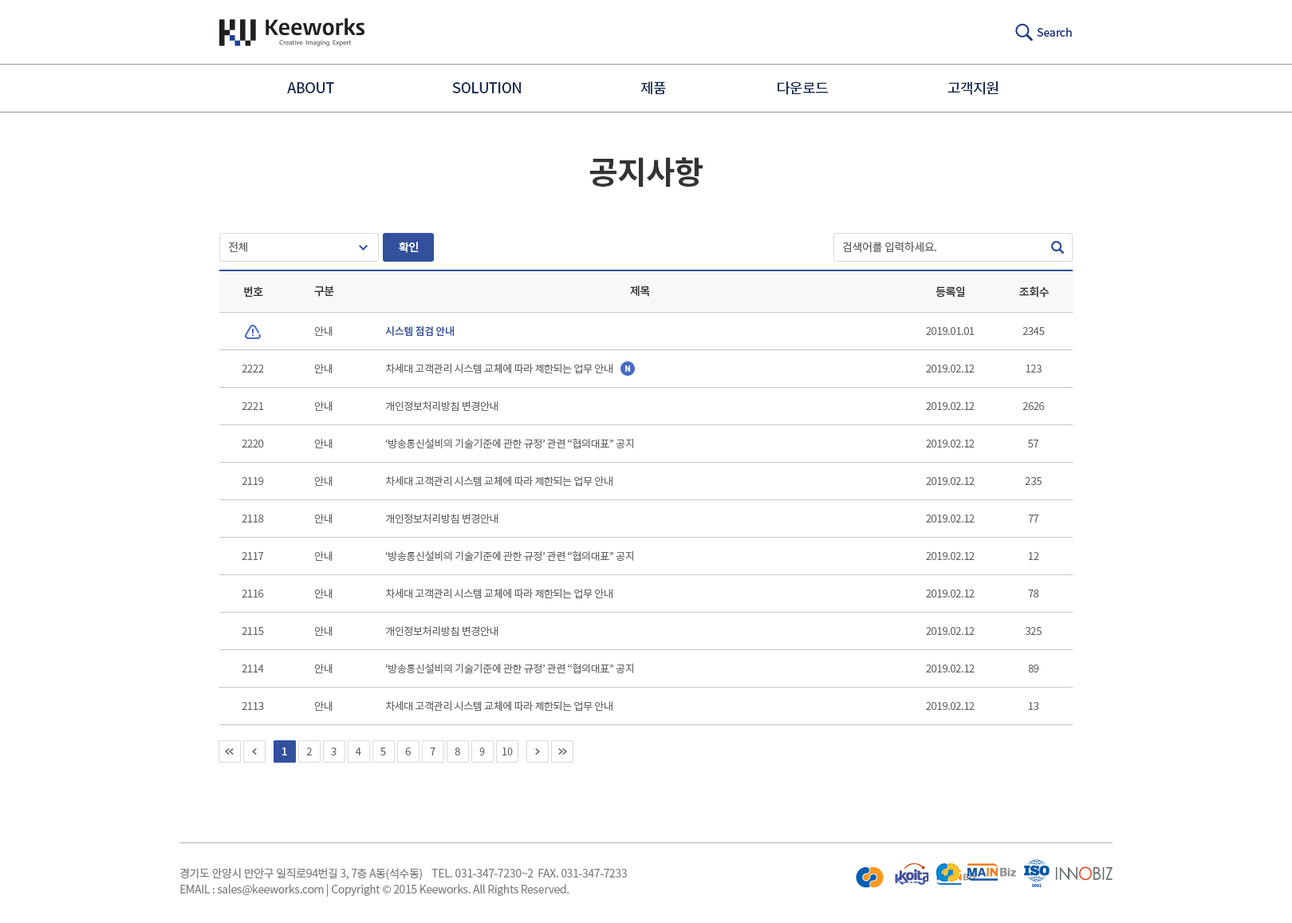
<style>
.page{position:relative;width:1292px;height:923px;background:#ffffff}
.page>*{position:absolute;margin:0}
.t1{font:11.2px "NotoSansCJKkr-Medium";letter-spacing:-0.025em;color:#1b3780}
.t2{font:14.4px "NotoSansCJKkr-Medium";letter-spacing:-0.025em;color:#1c3053;text-transform:uppercase}
.t3{font:31.9px "NotoSansCJKkr-Bold";letter-spacing:-0.025em;color:#333333}
.t4{font:11.2px "NotoSansCJKkr-Regular";letter-spacing:-0.025em;color:#666666}
.t5{font:11.2px "NotoSansCJKkr-Medium";letter-spacing:-0.025em;color:#ffffff}
.t6{font:11.2px "NotoSansCJKkr-Medium";letter-spacing:-0.025em;color:#333333}
.t7{font:10.4px/37.5px "NotoSansCJKkr-DemiLight";letter-spacing:-0.025em;color:#666666}
.t8{font:10.4px "NotoSansCJKkr-Medium";letter-spacing:-0.025em;color:#33509c}
.t9{font:8px "NotoSansCJKkr-Bold";letter-spacing:-0.025em;color:#ffffff}
.t10{font:10.4px "NotoSansCJKkr-Medium";letter-spacing:-0.025em;color:#ffffff}
.t11{font:10.4px "NotoSansCJKkr-Regular";letter-spacing:-0.025em;color:#666666}
.t12{font:11.2px/16px "NotoSansCJKkr-Regular";letter-spacing:-0.025em;color:#808080}
</style>
<div class="page">
<p class="t1" style="left:1037px;top:27px;width:35px;height:10px">Search</p>
<p class="t2" style="left:287px;top:82px;width:47px;height:11px">ABOUT</p>
<p class="t2" style="left:452px;top:82px;width:70px;height:11px">SOLUTION</p>
<p class="t2" style="left:640px;top:81px;width:26px;height:14px">제품</p>
<p class="t2" style="left:778px;top:81px;width:50px;height:14px">다운로드</p>
<p class="t2" style="left:948px;top:81px;width:51px;height:14px">고객지원</p>
<p class="t3" style="left:589px;top:157px;width:114px;height:30px">공지사항</p>
<p class="t4" style="left:229px;top:242px;width:18px;height:10px">전체</p>
<p class="t5" style="left:399px;top:242px;width:20px;height:11px">확인</p>
<p class="t4" style="left:843px;top:242px;width:94px;height:11px">검색어를 입력하세요.</p>
<p class="t6" style="left:244px;top:286px;width:19px;height:11px">번호</p>
<p class="t6" style="left:314px;top:286px;width:20px;height:11px">구분</p>
<p class="t6" style="left:630px;top:286px;width:20px;height:11px">제목</p>
<p class="t6" style="left:936px;top:286px;width:29px;height:12px">등록일</p>
<p class="t6" style="left:1019px;top:286px;width:30px;height:12px">조회수</p>
<p class="t7" style="left:314px;top:326px;width:19px;height:385px">안내<br>안내<br>안내<br>안내<br>안내<br>안내<br>안내<br>안내<br>안내<br>안내<br>안내</p>
<p class="t8" style="left:385px;top:325px;width:69px;height:11px">시스템 점검 안내</p>
<p class="t7" style="left:926px;top:327px;width:49px;height:383px">2019.01.01<br>2019.02.12<br>2019.02.12<br>2019.02.12<br>2019.02.12<br>2019.02.12<br>2019.02.12<br>2019.02.12<br>2019.02.12<br>2019.02.12<br>2019.02.12</p>
<p class="t7" style="left:1023px;top:327px;width:22px;height:383px;text-align:center">2345<br>123<br>2626<br>57<br>235<br>77<br>12<br>78<br>325<br>89<br>13</p>
<p class="t7" style="left:242px;top:365px;width:22px;height:345px;text-align:center">2222<br>2221<br>2220<br>2119<br>2118<br>2117<br>2116<br>2115<br>2114<br>2113</p>
<p class="t7" style="left:386px;top:363px;width:247px;height:348px">차세대 고객관리 시스템 교체에 따라 제한되는 업무 안내<br>개인정보처리방침 변경안내<br>‘방송통신설비의 기술기준에 관한 규정’ 관련 “협의대표” 공지<br>차세대 고객관리 시스템 교체에 따라 제한되는 업무 안내<br>개인정보처리방침 변경안내<br>‘방송통신설비의 기술기준에 관한 규정’ 관련 “협의대표” 공지<br>차세대 고객관리 시스템 교체에 따라 제한되는 업무 안내<br>개인정보처리방침 변경안내<br>‘방송통신설비의 기술기준에 관한 규정’ 관련 “협의대표” 공지<br>차세대 고객관리 시스템 교체에 따라 제한되는 업무 안내</p>
<p class="t9" style="left:625px;top:365px;width:5px;height:7px">N</p>
<p class="t10" style="left:282px;top:747px;width:5px;height:8px">1</p>
<p class="t11" style="left:306px;top:747px;width:6px;height:8px">2</p>
<p class="t11" style="left:331px;top:747px;width:6px;height:8px">3</p>
<p class="t11" style="left:355px;top:747px;width:6px;height:8px">4</p>
<p class="t11" style="left:380px;top:747px;width:6px;height:8px">5</p>
<p class="t11" style="left:405px;top:747px;width:6px;height:8px">6</p>
<p class="t11" style="left:430px;top:747px;width:5px;height:8px">7</p>
<p class="t11" style="left:455px;top:747px;width:5px;height:8px">8</p>
<p class="t11" style="left:479px;top:747px;width:6px;height:8px">9</p>
<p class="t11" style="left:502px;top:747px;width:11px;height:8px">10</p>
<p class="t12" style="left:180px;top:868px;width:447px;height:29px">경기도 안양시 만안구 일직로94번길 3, 7층 A동(석수동)    TEL. 031-347-7230~2  FAX. 031-347-7233<br>EMAIL : sales@keeworks.com | Copyright © 2015 Keeworks. All Rights Reserved.</p>
</div>
